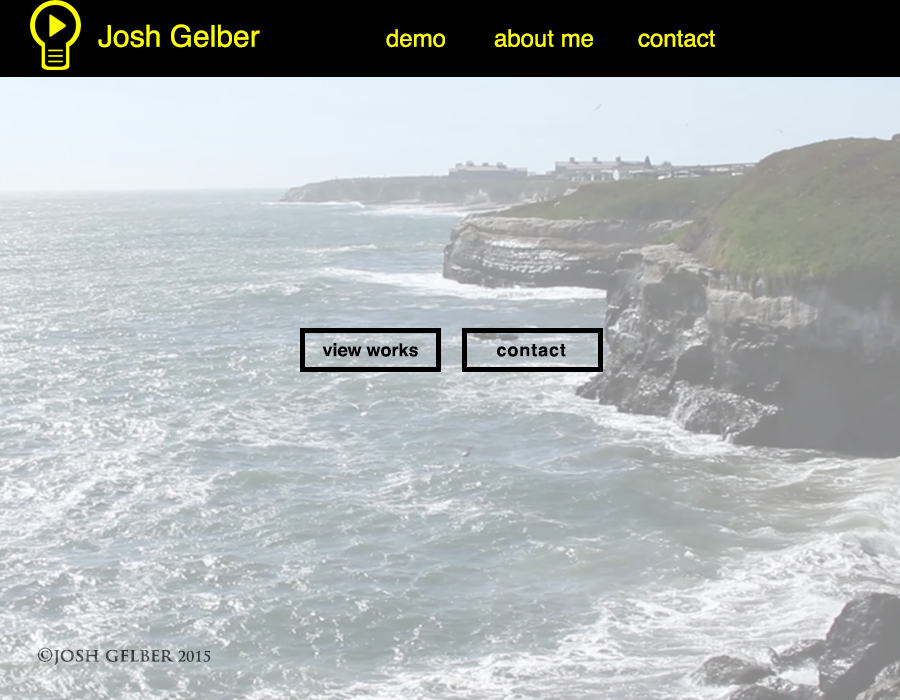
<style>
.page{position:relative;width:900px;height:700px}
.page>*{position:absolute;margin:0}
.t1{font:24px "Helvetica";color:#ffff00}
.t2{font:30px "Helvetica";color:#ffff00}
.t3{font:18px "Helvetica-Bold";color:#000000}
.t4{font:18px "Helvetica-Bold";letter-spacing:0.05em;color:#000000}
.t5{font:18px "TrajanPro-Bold"}
.t6{font:14px "TrajanPro-Bold"}
</style>
<div class="page">
<p class="t1" style="left:98px;top:24px;width:617px;height:24px"><span class="t2">Josh Gelber    </span>demo  about me  contact</p>
<p class="t3" style="left:322px;top:343px;width:96px;height:14px">view works</p>
<p class="t4" style="left:497px;top:344px;width:69px;height:13px">contact</p>
<p class="t5" style="left:37px;top:647px;width:174px;height:19px">©josh gelber <span class="t6">2015</span></p>
</div>
